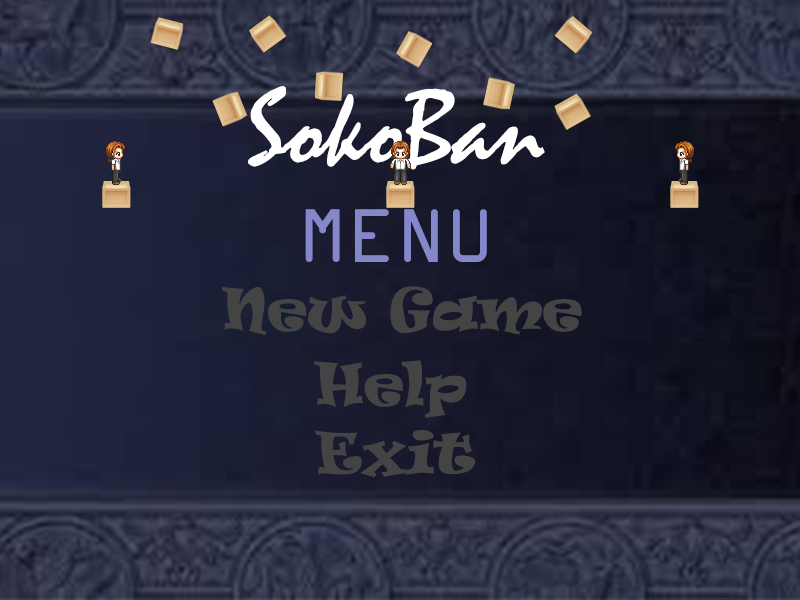
<style>
.page{position:relative;width:800px;height:600px}
.page>*{position:absolute;margin:0}
.t1{font:108.4px "Mistral";color:#ffffff}
.t2{font:81.3px "OCRAExtended";color:#8587cb}
.t3{font:54.2px "Ravie";color:#444444}
</style>
<div class="page">
<p class="t1" style="left:248px;top:86px;width:297px;height:84px">SokoBan</p>
<p class="t2" style="left:305px;top:209px;width:182px;height:53px">MENU</p>
<p class="t3" style="left:222px;top:286px;width:360px;height:49px">New Game</p>
<p class="t3" style="left:314px;top:360px;width:153px;height:58px">Help</p>
<p class="t3" style="left:315px;top:430px;width:161px;height:48px">Exit</p>
</div>
